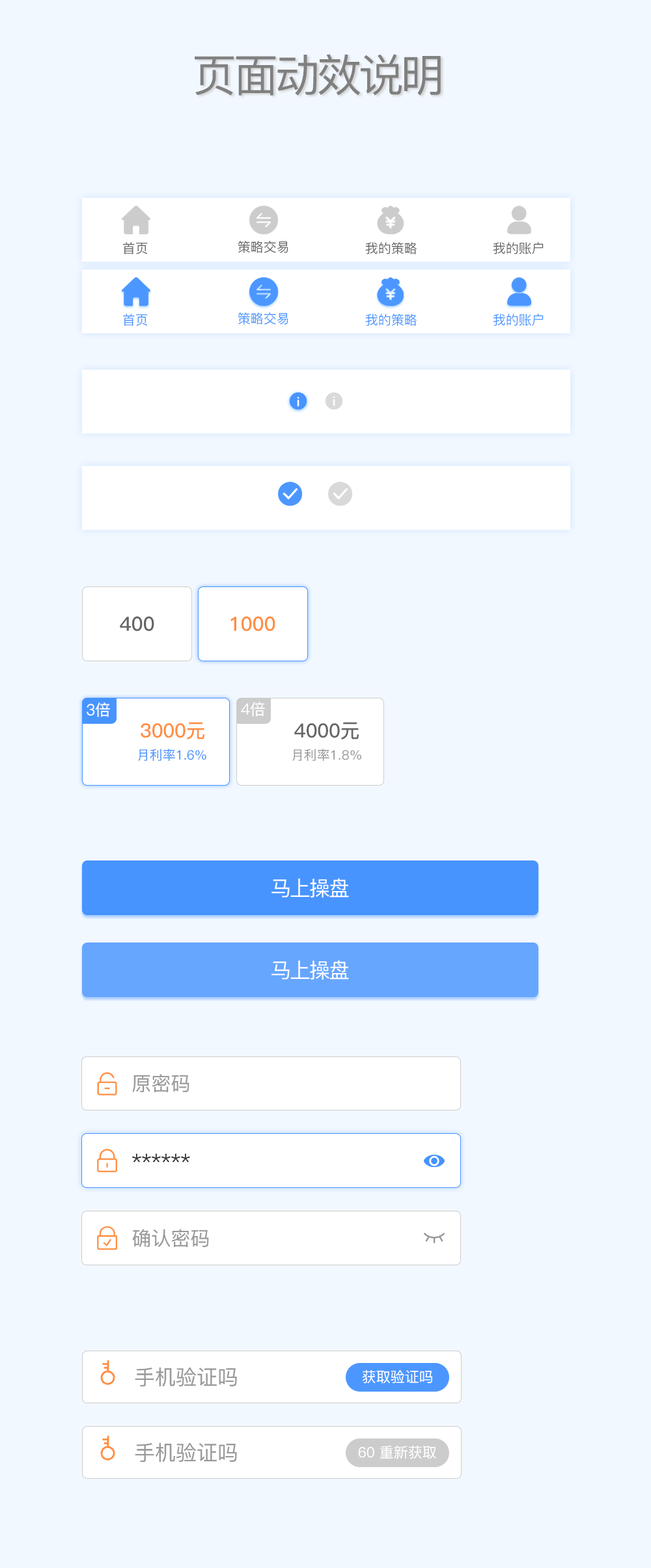
<style>
.page{position:relative;width:651px;height:1568px;background:#f2f8ff}
.page>*{position:absolute;margin:0}
.t1{font:44.3px "PingFang-SC-Medium";letter-spacing:-0.06em;color:#808080}
.t2{font:13px "PingFang-SC-Medium";color:#666666}
.t3{font:13px "PingFang-SC-Medium";color:#4c97ff}
.t4{font:19.5px "PingFang-SC-Bold";color:#666666}
.t5{font:19.5px "PingFang-SC-Bold";color:#ff8e42}
.t6{font:15.6px "PingFang-SC-Medium";color:#ffffff}
.t7{font:13px "PingFang-SC-Medium";color:#4794ff}
.t8{font:13px "PingFang-SC-Medium";color:#999999}
.t9{font:20.8px "PingFang-SC-Medium";letter-spacing:-0.06em;color:#ffffff}
.t10{font:19.5px "PingFang-SC-Medium";color:#999999}
.t11{font:19.5px "PingFang-SC-Medium";color:#333333}
.t12{font:20.8px "PingFang-SC-Medium";color:#999999}
.t13{font:14.3px "PingFang-SC-Medium";color:#ffffff}
</style>
<div class="page">
<p class="t1" style="left:195px;top:54px;width:246px;height:42px">页面动效说明</p>
<p class="t2" style="left:123px;top:242px;width:25px;height:12px">首页</p>
<p class="t2" style="left:238px;top:241px;width:50px;height:12px">策略交易</p>
<p class="t2" style="left:365px;top:242px;width:52px;height:12px">我的策略</p>
<p class="t2" style="left:493px;top:242px;width:50px;height:12px">我的账户</p>
<p class="t3" style="left:123px;top:314px;width:25px;height:12px">首页</p>
<p class="t3" style="left:238px;top:312px;width:50px;height:13px">策略交易</p>
<p class="t3" style="left:365px;top:314px;width:52px;height:12px">我的策略</p>
<p class="t3" style="left:493px;top:314px;width:50px;height:12px">我的账户</p>
<p class="t4" style="left:120px;top:616px;width:34px;height:15px">400</p>
<p class="t5" style="left:230px;top:616px;width:45px;height:15px">1000</p>
<p class="t6" style="left:241px;top:702px;width:24px;height:15px">4倍</p>
<p class="t6" style="left:87px;top:702px;width:23px;height:15px">3倍</p>
<p class="t5" style="left:141px;top:722px;width:63px;height:17px">3000元</p>
<p class="t4" style="left:294px;top:722px;width:65px;height:17px">4000元</p>
<p class="t7" style="left:138px;top:749px;width:68px;height:13px">月利率1.6%</p>
<p class="t8" style="left:292px;top:749px;width:70px;height:13px">月利率1.8%</p>
<p class="t9" style="left:271px;top:878px;width:78px;height:20px">马上操盘</p>
<p class="t9" style="left:271px;top:960px;width:78px;height:20px">马上操盘</p>
<p class="t10" style="left:132px;top:1074px;width:57px;height:18px">原密码</p>
<p class="t11" style="left:132px;top:1153px;width:58px;height:9px">******</p>
<p class="t10" style="left:132px;top:1229px;width:77px;height:18px">确认密码</p>
<p class="t12" style="left:135px;top:1367px;width:102px;height:20px">手机验证吗</p>
<p class="t13" style="left:362px;top:1370px;width:70px;height:14px">获取验证吗</p>
<p class="t12" style="left:135px;top:1442px;width:102px;height:21px">手机验证吗</p>
<p class="t13" style="left:358px;top:1445px;width:78px;height:14px">60 重新获取</p>
</div>
